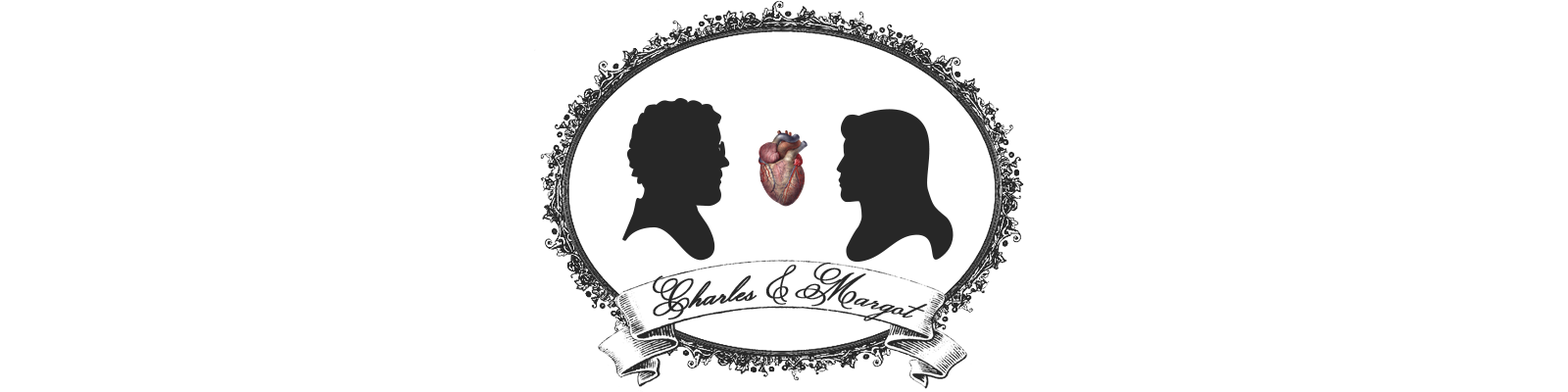
<style>
.page{position:relative;width:1568px;height:392px;background:#ffffff}
.page>*{position:absolute;margin:0}
.t1{font:37.2px "MonsieurLaDoulaise-Regular";letter-spacing:-0.012em;color:#272727;font-weight:bold}
</style>
<div class="page">
<p class="t1" style="left:652px;top:262px;width:276px;height:59px">Charles &amp; Margot</p>
</div>
